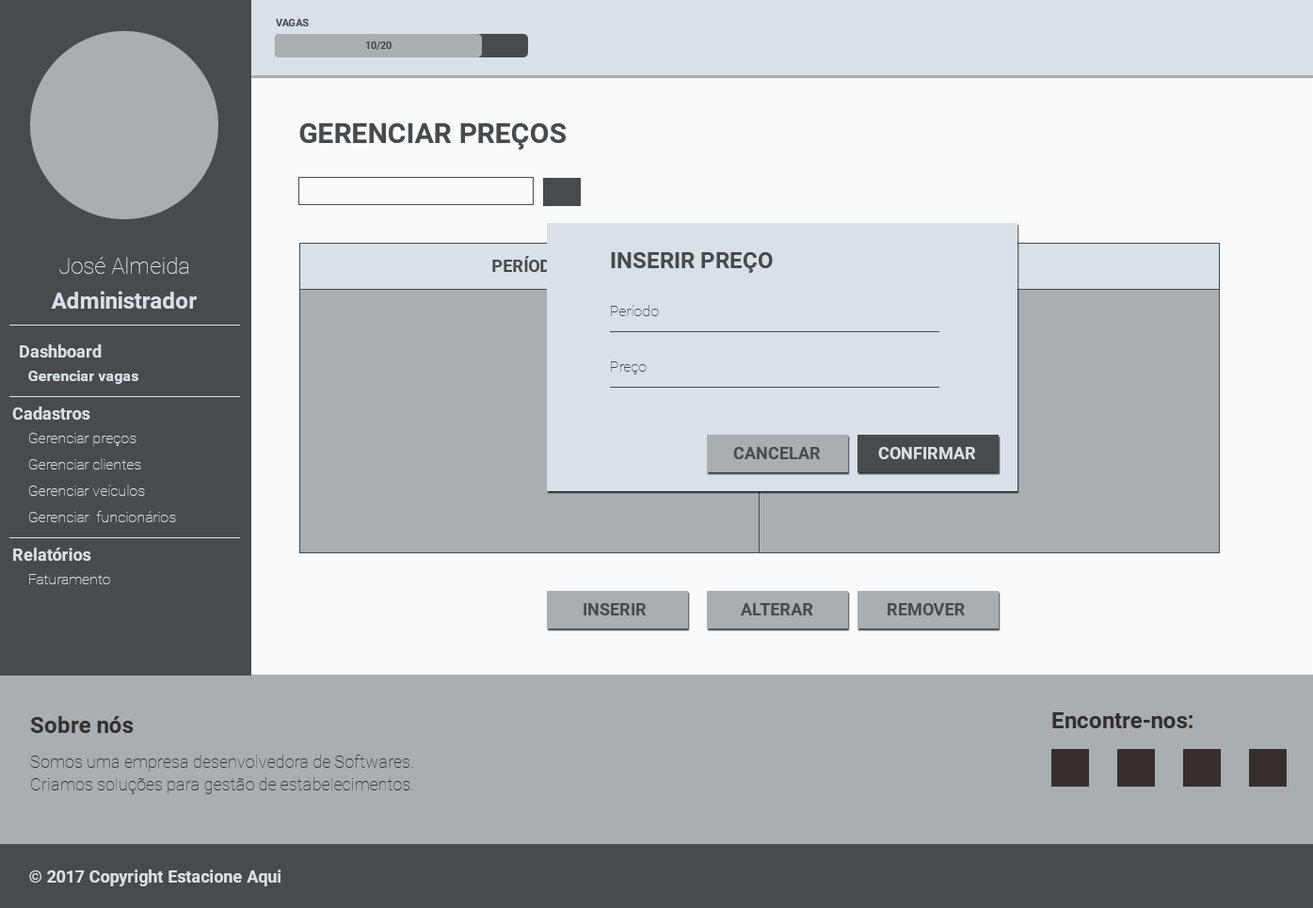
<style>
.page{position:relative;width:1313px;height:908px;background:#a9aeb3}
.page>*{position:absolute;margin:0}
.t1{font:10.4px "Roboto-Bold";color:#484b4d;text-transform:uppercase}
.t2{font:10.4px "Roboto-Bold";color:#484b4d}
.t3{font:28.2px "Roboto-Bold";color:#484b4d;text-transform:uppercase}
.t4{font:22.6px "Roboto-Thin";color:#d9e0e6}
.t5{font:16.9px "Roboto-Bold";color:#484b4d;text-transform:uppercase}
.t6{font:22.6px "Roboto-Bold";color:#484b4d;text-transform:uppercase}
.t7{font:22.6px "Roboto-Bold";color:#d9e0e6}
.t8{font:15.1px "Roboto-Thin";color:#484b4d}
.t9{font:16.9px "Roboto-Bold";color:#d9e0e6}
.t10{font:15.1px "Roboto-Bold";color:#d9e0e6}
.t11{font:15.1px "Roboto-Thin";color:#d9e0e6}
.t12{font:16.9px "Roboto-Bold";color:#d9e0e6;text-transform:uppercase}
.t13{font:22.6px "Roboto-Bold";color:#362f2d}
.t14{font:16.9px/22.6px "Roboto-Thin";color:#362f2d}
</style>
<div class="page">
<p class="t1" style="left:276px;top:19px;width:33px;height:7px">Vagas</p>
<p class="t2" style="left:365px;top:41px;width:27px;height:9px">10/20</p>
<p class="t3" style="left:299px;top:123px;width:267px;height:27px">gerenciar preços</p>
<p class="t4" style="left:59px;top:257px;width:130px;height:17px">José Almeida</p>
<p class="t5" style="left:492px;top:256px;width:70px;height:16px">período</p>
<p class="t6" style="left:611px;top:252px;width:162px;height:21px">inseriR PREÇO</p>
<p class="t7" style="left:51px;top:291px;width:146px;height:18px">Administrador</p>
<p class="t8" style="left:611px;top:305px;width:48px;height:11px">Período</p>
<p class="t9" style="left:20px;top:344px;width:82px;height:14px">Dashboard</p>
<p class="t8" style="left:611px;top:361px;width:36px;height:14px">Preço</p>
<p class="t10" style="left:28px;top:370px;width:110px;height:14px">Gerenciar vagas</p>
<p class="t9" style="left:12px;top:407px;width:78px;height:13px">Cadastros</p>
<p class="t11" style="left:29px;top:433px;width:107px;height:13px">Gerenciar preços</p>
<p class="t5" style="left:733px;top:447px;width:87px;height:12px">CancelaR</p>
<p class="t12" style="left:878px;top:447px;width:97px;height:12px">Confirmar</p>
<p class="t11" style="left:29px;top:458px;width:112px;height:12px">Gerenciar clientes</p>
<p class="t11" style="left:29px;top:485px;width:116px;height:11px">Gerenciar veículos</p>
<p class="t11" style="left:29px;top:511px;width:147px;height:11px">Gerenciar  funcionários</p>
<p class="t9" style="left:13px;top:548px;width:78px;height:13px">Relatórios</p>
<p class="t11" style="left:29px;top:574px;width:81px;height:10px">Faturamento</p>
<p class="t5" style="left:584px;top:603px;width:62px;height:13px">INSERIR</p>
<p class="t5" style="left:741px;top:603px;width:72px;height:13px">ALTERAR</p>
<p class="t5" style="left:888px;top:603px;width:77px;height:13px">REMOVER</p>
<p class="t13" style="left:1052px;top:712px;width:140px;height:16px">Encontre-nos:</p>
<p class="t13" style="left:30px;top:716px;width:104px;height:17px">Sobre nós</p>
<p class="t14" style="left:30px;top:755px;width:383px;height:39px">Somos uma empresa desenvolvedora de Softwares. Criamos soluções para gestão de estabelecimentos.</p>
<p class="t9" style="left:29px;top:870px;width:252px;height:17px">© 2017 Copyright Estacione Aqui</p>
</div>
